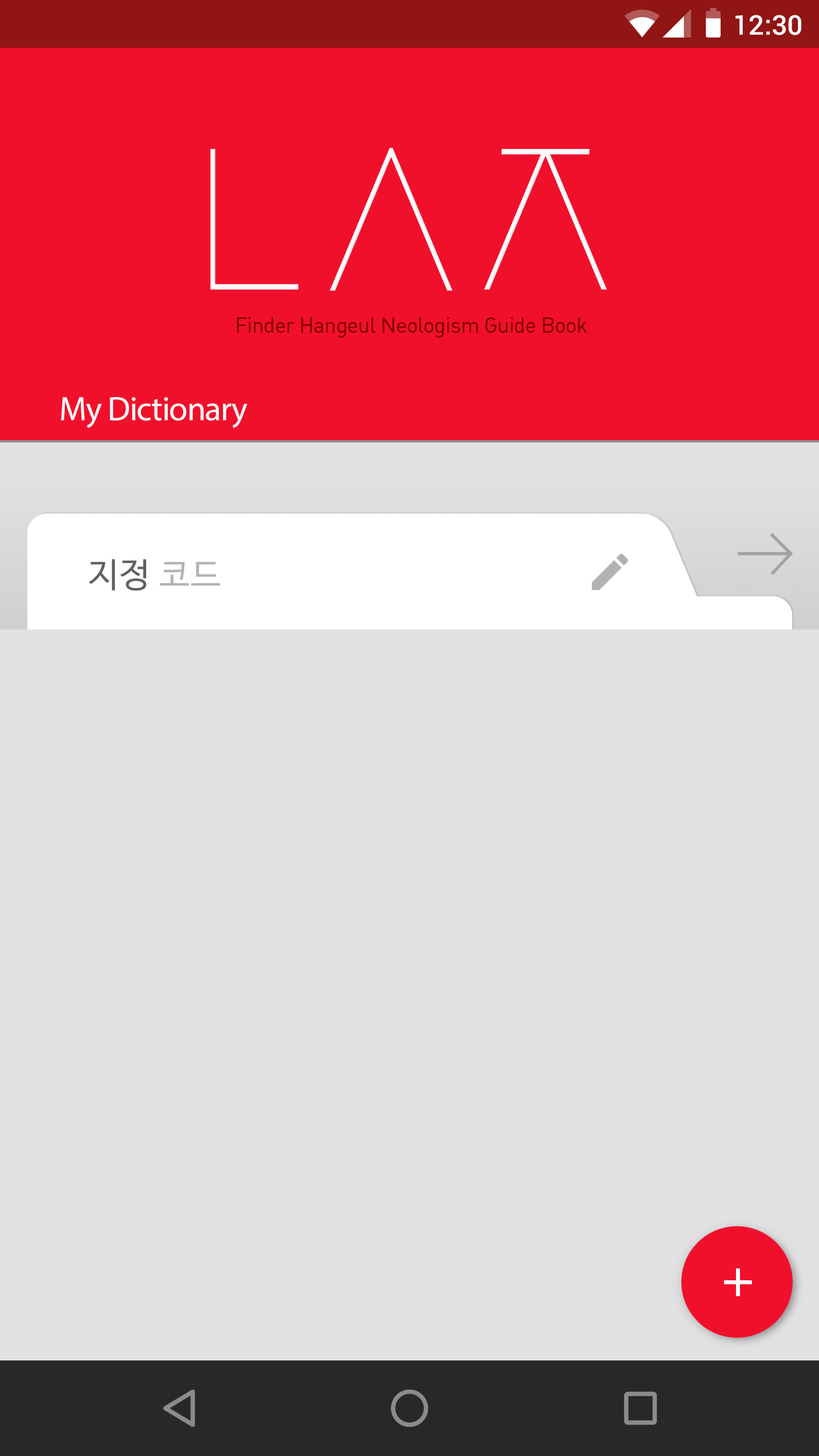
<style>
.page{position:relative;width:819px;height:1456px;background:#e1e1e1}
.page>*{position:absolute;margin:0}
.t1{font:27.3px "Roboto-Medium";color:#ffffff}
.t2{font:21.6px "DINAlternate-Regular";letter-spacing:-0.025em;color:#790101}
.t3{font:34.1px "MyriadPro-Regular";letter-spacing:-0.025em;color:#ffffff}
.t4{font:34.1px "NanumBarunGothic";letter-spacing:0.025em;color:#616161}
.t5{font:34.1px "NanumBarunGothic";letter-spacing:0.025em;color:#b3b3b3}
</style>
<div class="page">
<p class="t1" style="left:735px;top:15px;width:66px;height:20px">12:30</p>
<p class="t2" style="left:237px;top:317px;width:350px;height:21px">Finder Hangeul Neologism Guide Book</p>
<p class="t3" style="left:61px;top:397px;width:186px;height:31px">My Dictionary</p>
<p class="t4" style="left:89px;top:559px;width:132px;height:32px">지정 <span class="t5">코드</span></p>
</div>
